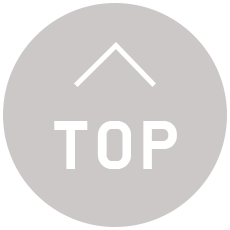
<style>
.page{position:relative;width:230px;height:230px;background:#cdc8c8}
.page>*{position:absolute;margin:0}
.t1{font:70px "DoHyeon-Regular";letter-spacing:0.1em;color:#ffffff}
</style>
<div class="page">
<p class="t1" style="left:54px;top:121px;width:123px;height:48px">TOP</p>
</div>
